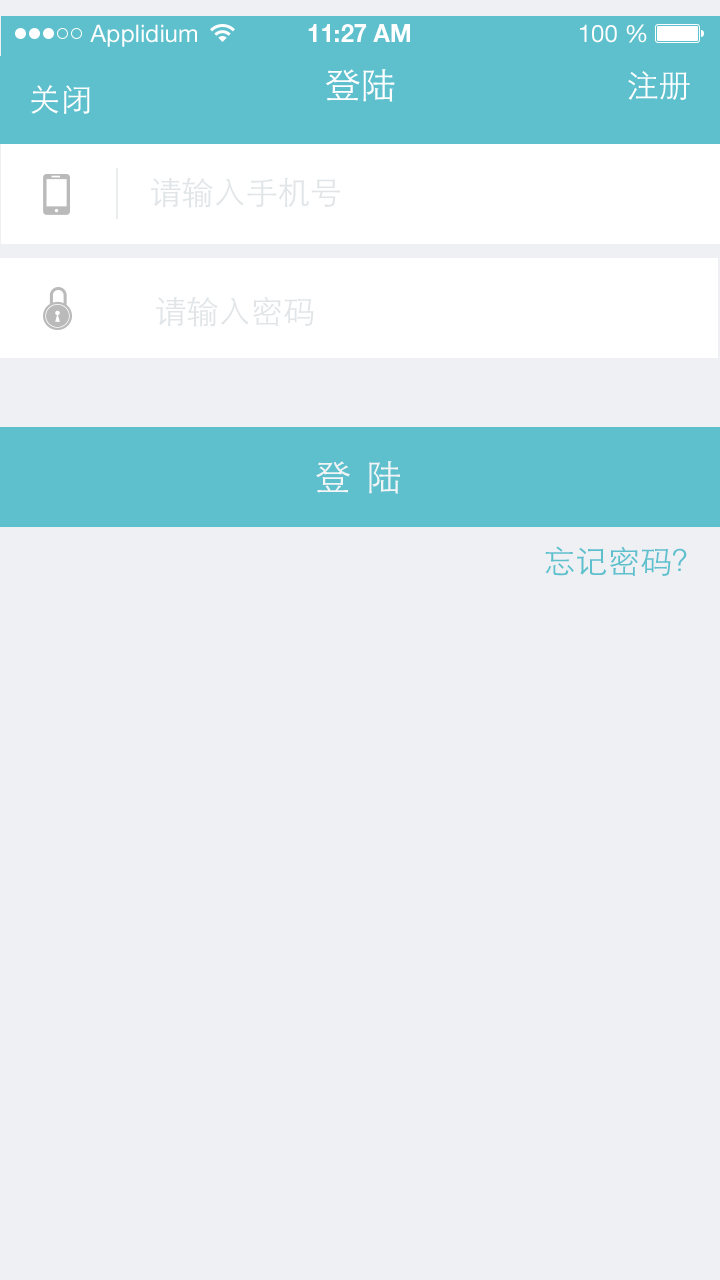
<style>
.page{position:relative;width:720px;height:1280px;background:#eff0f4}
.page>*{position:absolute;margin:0}
.t1{font:36px "STHeitiSC-Light";color:#ffffff}
.t2{font:32px "STHeitiSC-Light";color:#ffffff}
.t3{font:32px "STHeitiSC-Light";color:#e1e5e7}
.t4{font:36px "STHeitiSC-Light";letter-spacing:-0.08em;color:#f3f4f6}
.t5{font:32px "STHeitiSC-Light";color:#5fc0cd}
</style>
<div class="page">
<p class="t1" style="left:325px;top:69px;width:70px;height:33px">登陆</p>
<p class="t2" style="left:628px;top:71px;width:62px;height:29px">注册</p>
<p class="t2" style="left:31px;top:84px;width:59px;height:30px">关闭</p>
<p class="t3" style="left:151px;top:177px;width:189px;height:31px">请输入手机号</p>
<p class="t3" style="left:156px;top:296px;width:158px;height:31px">请输入密码</p>
<p class="t4" style="left:316px;top:461px;width:84px;height:33px">登   陆</p>
<p class="t5" style="left:545px;top:546px;width:142px;height:30px">忘记密码？</p>
</div>
